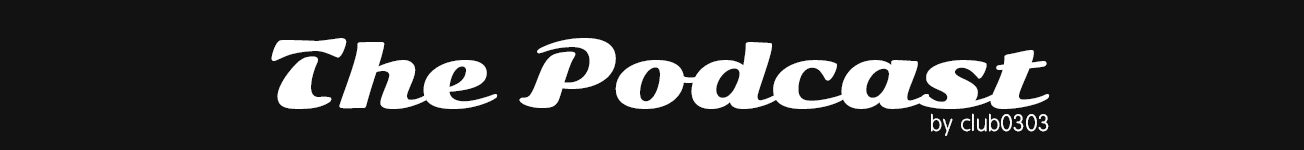
<style>
.page{position:relative;width:1304px;height:150px;background:#121212}
.page>*{position:absolute;margin:0}
.t1{font:90px "SonsieOne";color:#ffffff}
.t2{font:22px "BPreplay";color:#ffffff}
</style>
<div class="page">
<p class="t1" style="left:271px;top:38px;width:779px;height:71px">The Podcast</p>
<p class="t2" style="left:931px;top:113px;width:118px;height:23px">by club0303</p>
</div>
